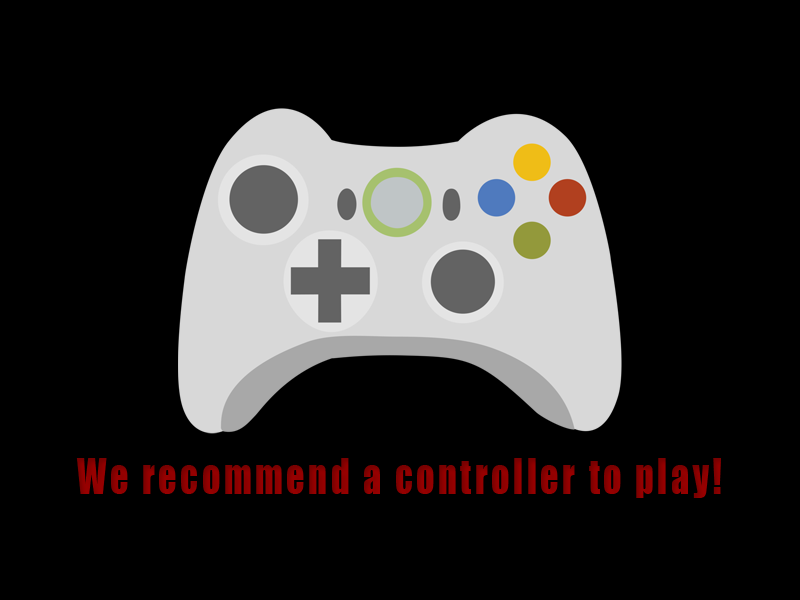
<style>
.page{position:relative;width:800px;height:600px;background:#000000}
.page>*{position:absolute;margin:0}
.t1{font:45px "Impact";letter-spacing:0.1em;color:#990000;scale:0.8 1}
</style>
<div class="page">
<p class="t1" style="left:76px;top:458px;width:645px;height:40px">We recommend a controller to play!</p>
</div>
